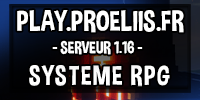
<style>
.page{position:relative;width:200px;height:100px}
.page>*{position:absolute;margin:0}
.t1{font:28.7px "DimboRegular";color:#ffffff}
.t2{font:16.9px "DimboRegular";color:#ffffff}
.t3{font:27.5px "DimboRegular";letter-spacing:0.05em;color:#ffffff}
</style>
<div class="page">
<p class="t1" style="left:17px;top:10px;width:167px;height:23px">PLAY.PROELIIS.FR</p>
<p class="t2" style="left:52px;top:40px;width:91px;height:15px">- SERVEUR 1.16 -</p>
<p class="t3" style="left:29px;top:65px;width:141px;height:22px">SYSTEME RPG</p>
</div>
